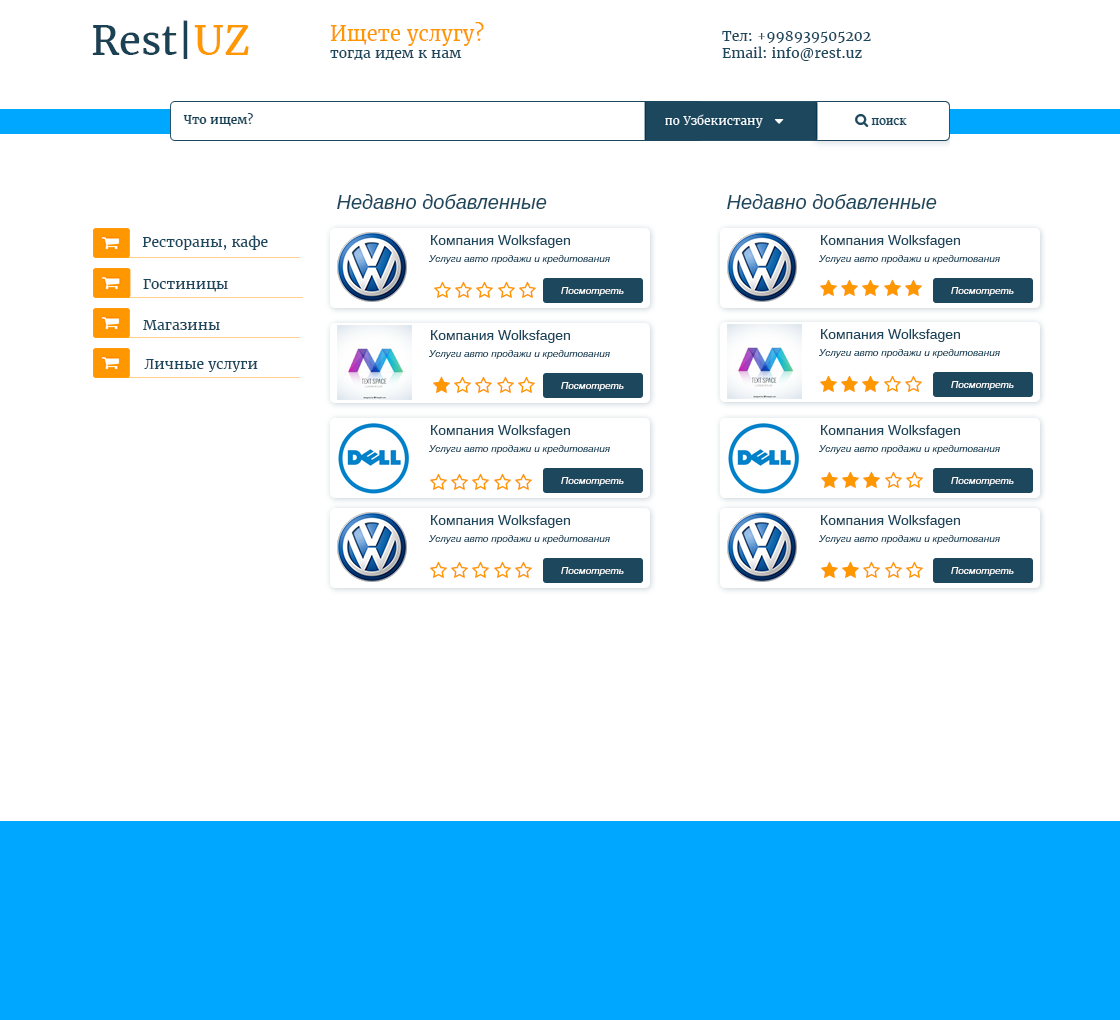
<style>
.page{position:relative;width:1120px;height:1020px;background:#ffffff}
.page>*{position:absolute;margin:0}
.t1{font:40px "Merriweather-Regular";color:#1b4154}
.t2{font:40px "Merriweather-Regular";color:#ff9700}
.t3{font:14px "Merriweather-Regular";color:#1d475d}
.t4{font:20px "Merriweather-Regular";color:#ff9700}
.t5{font:20px "Arimo-Italic";color:#1d475d}
.t6{font:14px "Arimo";color:#1d475d}
.t7{font:10px "Arimo-Italic";color:#1d475d}
.t8{font:10px "Arimo-Italic";color:#ffffff}
</style>
<div class="page">
<p class="t1" style="left:92px;top:20px;width:157px;height:39px">Rest|<span class="t2">UZ</span></p>
<p class="t3" style="left:330px;top:22px;width:154px;height:38px"><span class="t4">Ищете услугу?<br></span>тогда идем к нам</p>
<p class="t3" style="left:722px;top:31px;width:149px;height:30px">Тел: +998939505202<br>Email: info@rest.uz</p>
<p class="t5" style="left:337px;top:194px;width:210px;height:15px">Недавно добавленные</p>
<p class="t5" style="left:727px;top:194px;width:210px;height:15px">Недавно добавленные</p>
<p class="t3" style="left:142px;top:235px;width:126px;height:15px">Рестораны, кафе</p>
<p class="t6" style="left:431px;top:235px;width:139px;height:13px">Компания Wolksfagen</p>
<p class="t6" style="left:821px;top:235px;width:139px;height:13px">Компания Wolksfagen</p>
<p class="t7" style="left:429px;top:255px;width:181px;height:9px">Услуги авто продажи и кредитования</p>
<p class="t7" style="left:819px;top:255px;width:181px;height:9px">Услуги авто продажи и кредитования</p>
<p class="t3" style="left:143px;top:279px;width:85px;height:13px">Гостиницы</p>
<p class="t8" style="left:561px;top:287px;width:63px;height:9px">Посмотреть</p>
<p class="t8" style="left:951px;top:287px;width:63px;height:9px">Посмотреть</p>
<p class="t3" style="left:143px;top:320px;width:77px;height:10px">Магазины</p>
<p class="t6" style="left:821px;top:329px;width:139px;height:13px">Компания Wolksfagen</p>
<p class="t6" style="left:431px;top:330px;width:139px;height:13px">Компания Wolksfagen</p>
<p class="t7" style="left:429px;top:350px;width:181px;height:9px">Услуги авто продажи и кредитования</p>
<p class="t7" style="left:819px;top:349px;width:181px;height:9px">Услуги авто продажи и кредитования</p>
<p class="t3" style="left:144px;top:359px;width:114px;height:13px">Личные услуги</p>
<p class="t8" style="left:561px;top:382px;width:63px;height:9px">Посмотреть</p>
<p class="t8" style="left:951px;top:381px;width:63px;height:9px">Посмотреть</p>
<p class="t6" style="left:431px;top:425px;width:139px;height:13px">Компания Wolksfagen</p>
<p class="t6" style="left:821px;top:425px;width:139px;height:13px">Компания Wolksfagen</p>
<p class="t7" style="left:429px;top:445px;width:181px;height:9px">Услуги авто продажи и кредитования</p>
<p class="t7" style="left:819px;top:445px;width:181px;height:9px">Услуги авто продажи и кредитования</p>
<p class="t8" style="left:561px;top:477px;width:63px;height:9px">Посмотреть</p>
<p class="t8" style="left:951px;top:477px;width:63px;height:9px">Посмотреть</p>
<p class="t6" style="left:431px;top:515px;width:139px;height:13px">Компания Wolksfagen</p>
<p class="t6" style="left:821px;top:515px;width:139px;height:13px">Компания Wolksfagen</p>
<p class="t7" style="left:429px;top:535px;width:181px;height:9px">Услуги авто продажи и кредитования</p>
<p class="t7" style="left:819px;top:535px;width:181px;height:9px">Услуги авто продажи и кредитования</p>
<p class="t8" style="left:561px;top:567px;width:63px;height:9px">Посмотреть</p>
<p class="t8" style="left:951px;top:567px;width:63px;height:9px">Посмотреть</p>
</div>
